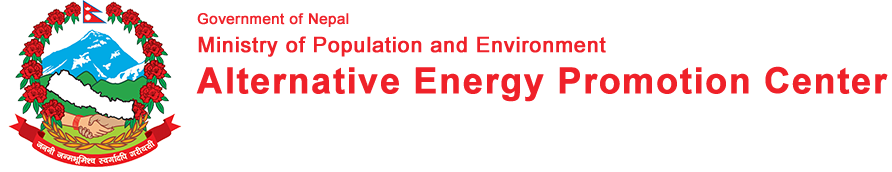
<style>
.page{position:relative;width:892px;height:172px;background:#ffffff}
.page>*{position:absolute;margin:0}
.t1{font:14.7px "ArialMT";letter-spacing:0.02em;color:#ef2129;font-weight:bold}
.t2{font:25.3px "Arial-BoldMT";letter-spacing:0.02em;color:#8c0001;font-weight:bold}
.t3{font:21.3px "ArialMT";letter-spacing:0.02em;color:#ef2129;font-weight:bold}
.t4{font:36px "Arial-BoldMT";letter-spacing:0.02em;color:#ef2129;font-weight:bold}
</style>
<div class="page">
<p class="t1" style="left:197px;top:13px;width:152px;height:14px"><span class="t2"><br></span>Government of Nepal</p>
<p class="t3" style="left:198px;top:36px;width:408px;height:21px">Ministry of Population and Environment</p>
<p class="t4" style="left:196px;top:66px;width:692px;height:36px">Alternative Energy Promotion Center</p>
</div>
